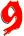
<style>
.page{position:relative;width:24px;height:36px;background:#ff0000}
.page>*{position:absolute;margin:0}
.t1{font:43px "TOXIA";color:#ff0000}
</style>
<div class="page">
<p class="t1" style="left:1px;top:0px;width:22px;height:35px">9</p>
</div>
